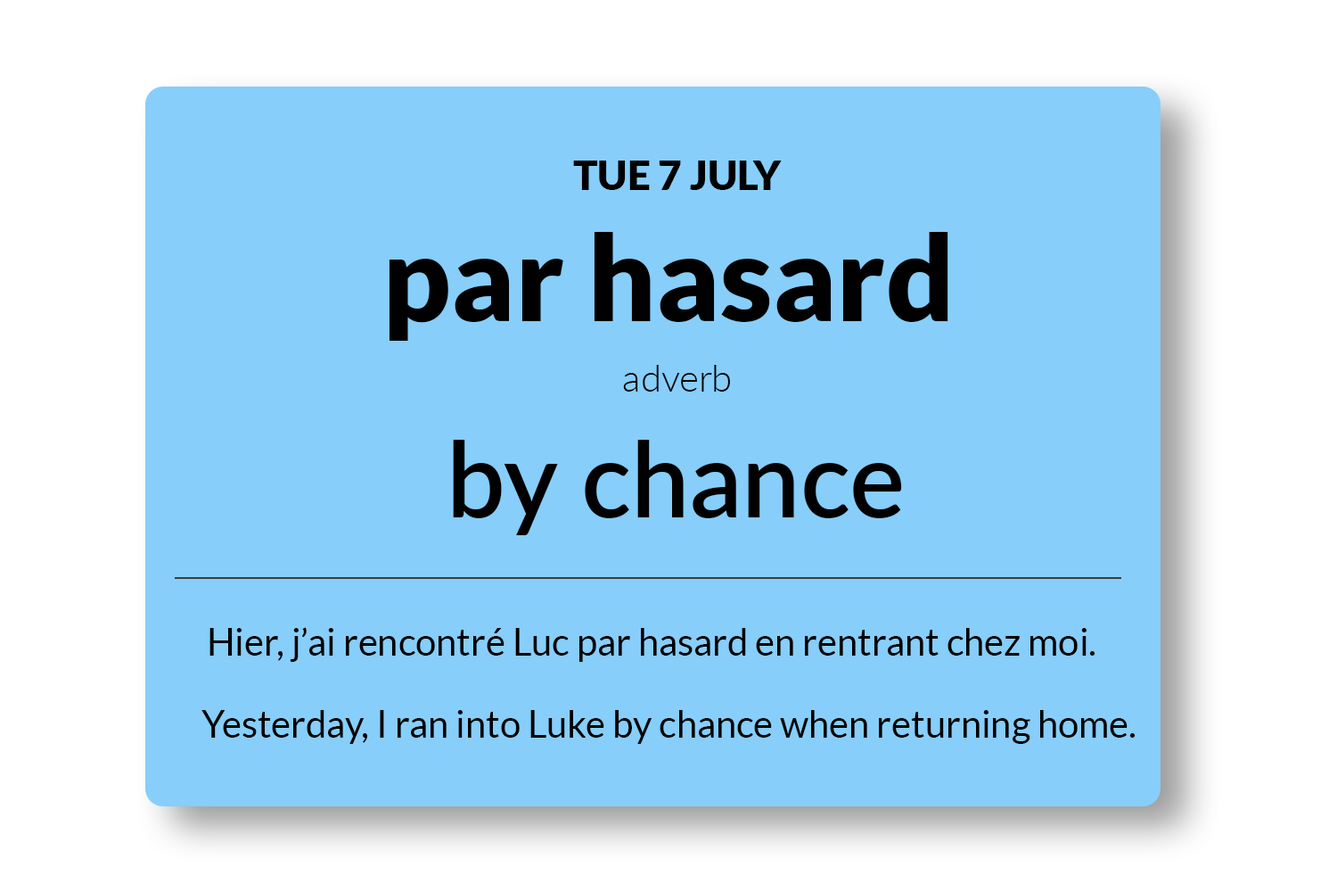
<style>
.page{position:relative;width:1337px;height:892px;background:#87cefa}
.page>*{position:absolute;margin:0}
.t1{font:40.9px "Lato-Black";color:#000000}
.t2{font:118.9px "Lato-Black";color:#000000}
.t3{font:37.2px "Lato-Light";color:#000000}
.t4{font:104px "Lato-Semibold";color:#000000}
.t5{font:37.2px "Lato-Regular";color:#000000}
</style>
<div class="page">
<p class="t1" style="left:573px;top:160px;width:209px;height:30px">TUE 7 JULY</p>
<p class="t2" style="left:389px;top:232px;width:560px;height:109px">par hasard</p>
<p class="t3" style="left:623px;top:365px;width:107px;height:26px">adverb</p>
<p class="t4" style="left:453px;top:440px;width:449px;height:95px">by chance</p>
<p class="t5" style="left:210px;top:627px;width:886px;height:35px">Hier, j’ai rencontré Luc par hasard en rentrant chez moi.</p>
<p class="t5" style="left:202px;top:710px;width:934px;height:34px">Yesterday, I ran into Luke by chance when returning home.</p>
</div>
